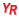
<style>
.page{position:relative;width:19px;height:19px;background:#ffffff}
.page>*{position:absolute;margin:0}
.t1{font:12px "Roboto-Regular";color:#d72428;font-weight:bold;font-style:italic}
</style>
<div class="page">
<p class="t1" style="left:3px;top:3px;width:8px;height:10px">Y</p>
<p class="t1" style="left:9px;top:5px;width:8px;height:10px">R</p>
</div>
